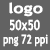
<style>
.page{position:relative;width:50px;height:50px;background:#626262}
.page>*{position:absolute;margin:0}
.t1{font:14.2px "TrebuchetMS-Bold";color:#ffffff;scale:1.28 1}
.t2{font:14.2px "TrebuchetMS-Bold";color:#ffffff;scale:0.75 1}
.t3{font:12.4px "TrebuchetMS-Bold";color:#ffffff;scale:0.74 1}
</style>
<div class="page">
<p class="t1" style="left:9px;top:2px;width:34px;height:15px">logo</p>
<p class="t2" style="left:9px;top:19px;width:31px;height:12px">50x50</p>
<p class="t3" style="left:3px;top:34px;width:45px;height:13px">png 72 ppi</p>
</div>
